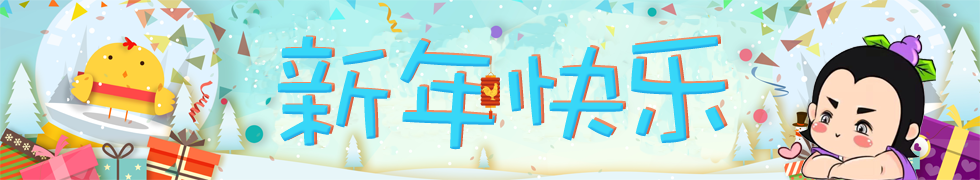
<style>
.page{position:relative;width:980px;height:180px}
.page>*{position:absolute;margin:0}
.t1{font:138px "DFWaWa-Md-HKP-BF";color:#37d7f8;text-transform:uppercase}
.t2{font:138px "DFWaWa-Md-HKP-BF";text-transform:uppercase}
.t3{font:138px "DFWaWaW5";color:#37d7f8;text-transform:uppercase}
.t4{font:138px "DFWaWaW5";text-transform:uppercase}
</style>
<div class="page">
<p class="t1" style="left:277px;top:36px;width:111px;height:110px">新</p>
<p class="t2" style="left:280px;top:35px;width:111px;height:110px">新</p>
<p class="t1" style="left:400px;top:40px;width:95px;height:110px">年</p>
<p class="t1" style="left:402px;top:38px;width:95px;height:110px">年</p>
<p class="t3" style="left:631px;top:36px;width:95px;height:107px">乐</p>
<p class="t4" style="left:634px;top:34px;width:95px;height:107px">乐</p>
<p class="t1" style="left:508px;top:47px;width:115px;height:94px">快</p>
<p class="t2" style="left:511px;top:45px;width:115px;height:94px">快</p>
</div>
